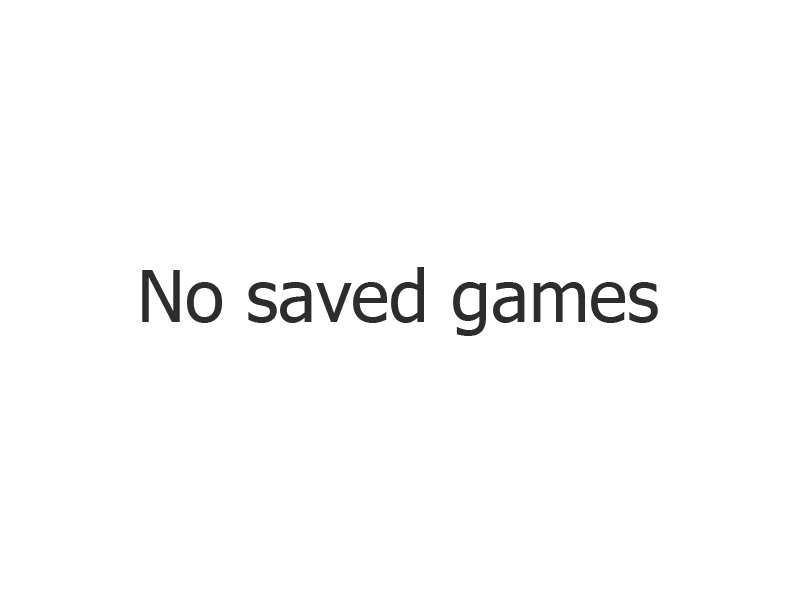
<style>
.page{position:relative;width:800px;height:600px;background:#ffffff}
.page>*{position:absolute;margin:0}
.t1{font:72px "Tahoma";color:#2d2d2d}
</style>
<div class="page">
<p class="t1" style="left:142px;top:267px;width:516px;height:69px">No saved games</p>
</div>
